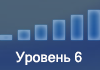
<style>
.page{position:relative;width:100px;height:70px}
.page>*{position:absolute;margin:0}
.t1{font:14px "MicrosoftSansSerif";color:#ffffff}
</style>
<div class="page">
<p class="t1" style="left:15px;top:51px;width:67px;height:14px">Уровень 6</p>
</div>
